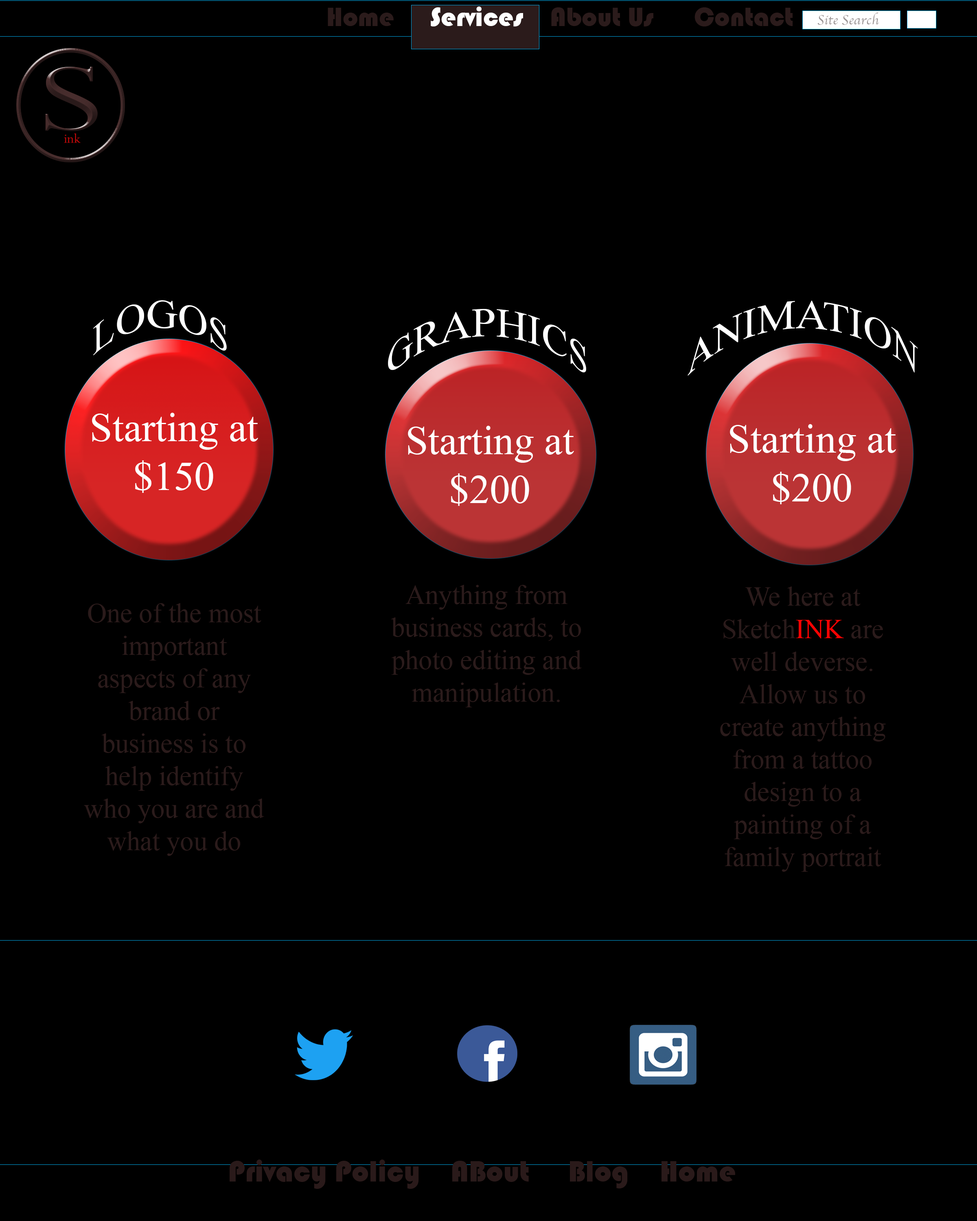
<style>
.page{position:relative;width:977px;height:1221px;background:#000000}
.page>*{position:absolute;margin:0}
.t1{font:27.1px "Bauhaus93";color:#ffffff}
.t2{font:13.6px "Apple-Chancery";color:#9b9595}
.t3{font:108.2px "Perpetua";color:#392424;scale:1.44 1}
.t4{font:14.9px "Perpetua"}
.t5{font:40.7px "TimesNewRomanPSMT";color:#ffffff}
.t6{font:27.1px "TimesNewRomanPSMT";color:#2b1b1b}
.t7{font:27.1px "TimesNewRomanPSMT";color:#fb0202}
.t8{font:30.5px "Bauhaus93";color:#2a1a1a}
</style>
<div class="page">
<p class="t1" style="left:431px;top:7px;width:92px;height:19px">Services</p>
<p class="t2" style="left:817px;top:13px;width:62px;height:12px">Site Search</p>
<p class="t3" style="left:45px;top:67px;width:53px;height:64px">S</p>
<p class="t4" style="left:64px;top:133px;width:17px;height:10px">ink</p>
<p class="t5" style="left:93px;top:300px;width:134px;height:56px">LOGOS</p>
<p class="t5" style="left:687px;top:300px;width:231px;height:76px;text-align:center">ANIMATION</p>
<p class="t5" style="left:388px;top:309px;width:198px;height:63px">GRAPHICS</p>
<p class="t5" style="left:92px;top:413px;width:166px;height:80px;text-align:center">Starting at<br>        $150</p>
<p class="t5" style="left:408px;top:426px;width:166px;height:80px;text-align:center">Starting at<br>$200</p>
<p class="t5" style="left:730px;top:424px;width:166px;height:80px;text-align:center">Starting at<br>$200</p>
<p class="t6" style="left:391px;top:585px;width:191px;height:122px;text-align:center">Anything from business cards, to photo editing and manipulation.</p>
<p class="t6" style="left:720px;top:586px;width:166px;height:286px;text-align:center">We here at Sketch<span class="t7">INK</span> are well deverse. Allow us to create anything from a tattoo design to a painting of a family portrait</p>
<p class="t6" style="left:84px;top:603px;width:180px;height:253px;text-align:center">One of the most important aspects of any brand or business is to help identify who you are and what you do</p>
<p class="t8" style="left:230px;top:1159px;width:505px;height:30px">Privacy Policy    ABout     Blog    Home</p>
</div>
